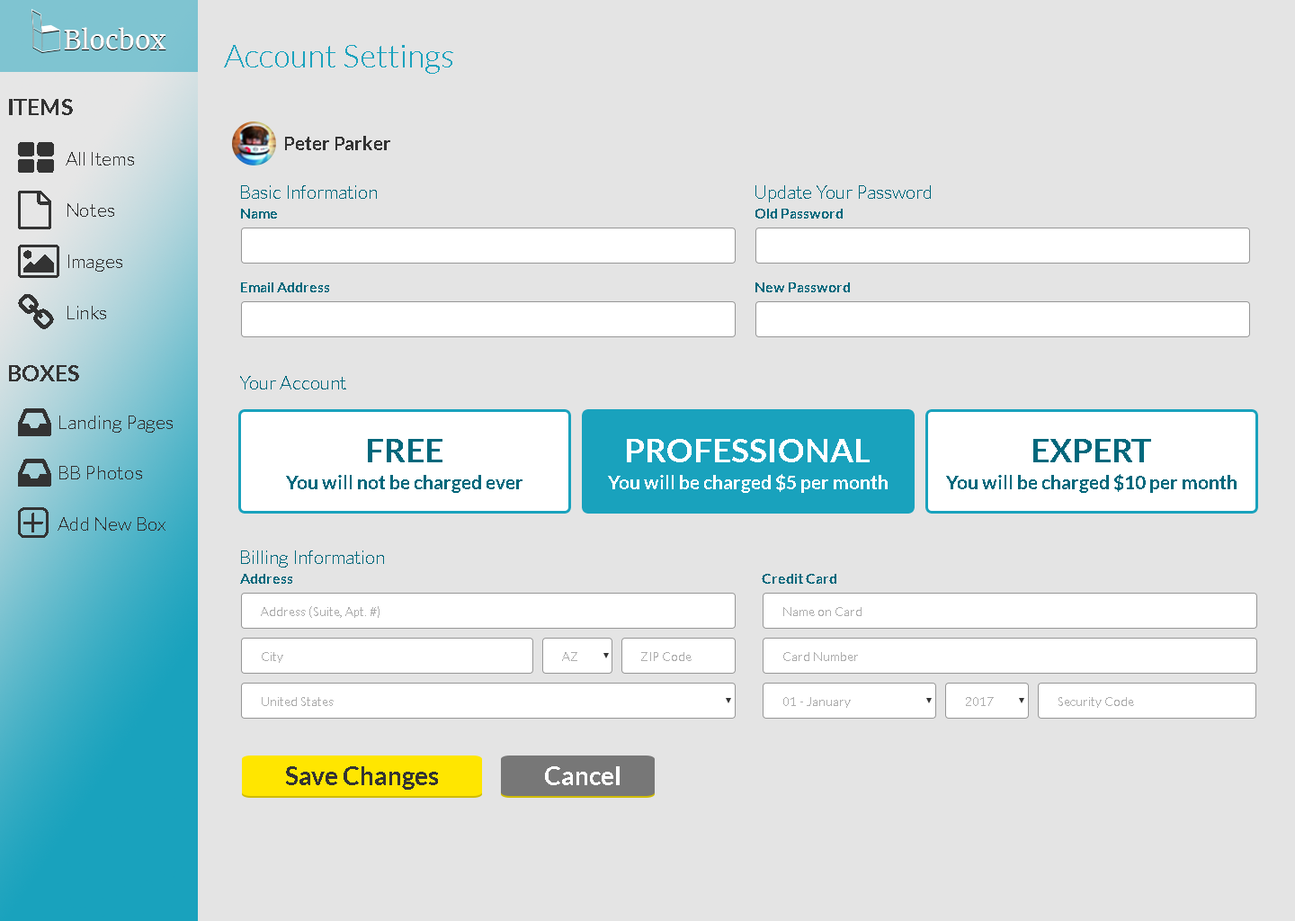
<style>
.page{position:relative;width:1295px;height:921px;background:#e4e4e4}
.page>*{position:absolute;margin:0}
.t1{font:32.4px "Lato-Light";color:#19a2bd}
.t2{font:22.4px "Lato-Bold";color:#333333;text-transform:uppercase}
.t3{font:18.9px "Lato-Bold";color:#333333}
.t4{font:19.2px/51.2px "Lato-Light";color:#333333}
.t5{font:18.9px "Lato-Light";color:#00687c}
.t6{font:14.4px "Lato-Bold";color:#00687c}
.t7{font:33.6px "Lato-Bold";color:#00687c}
.t8{font:33.6px "Lato-Bold";color:#ffffff}
.t9{font:19.2px "Lato-Bold";color:#ffffff}
.t10{font:19.2px "Lato-Bold";color:#00687c}
.t11{font:12.6px "Lato-Light";color:#adadad}
.t12{font:25.6px "Lato-Bold";color:#333333}
.t13{font:25.6px "Lato-Bold";color:#ffffff}
</style>
<div class="page">
<p class="t1" style="left:224px;top:45px;width:229px;height:29px">Account Settings</p>
<p class="t2" style="left:9px;top:99px;width:64px;height:16px">Items</p>
<p class="t3" style="left:285px;top:136px;width:105px;height:14px">Peter Parker</p>
<p class="t4" style="left:66px;top:152px;width:68px;height:167px;text-align:justify">All Items<br>Notes<br>Images<br>Links</p>
<p class="t5" style="left:241px;top:185px;width:136px;height:14px">Basic Information</p>
<p class="t5" style="left:755px;top:185px;width:176px;height:17px">Update Your Password</p>
<p class="t6" style="left:241px;top:209px;width:36px;height:10px">Name</p>
<p class="t6" style="left:755px;top:209px;width:88px;height:10px">Old Password</p>
<p class="t6" style="left:241px;top:282px;width:88px;height:10px">Email Address</p>
<p class="t6" style="left:755px;top:282px;width:95px;height:10px">New Password</p>
<p class="t2" style="left:9px;top:365px;width:70px;height:16px">Boxes</p>
<p class="t5" style="left:240px;top:376px;width:106px;height:13px">Your Account</p>
<p class="t4" style="left:58px;top:415px;width:115px;height:116px;text-align:justify">Landing Pages<br>BB Photos<br>Add New Box</p>
<p class="t7" style="left:368px;top:439px;width:74px;height:23px">FREE</p>
<p class="t8" style="left:627px;top:439px;width:243px;height:23px">PROFESSIONAL</p>
<p class="t7" style="left:1033px;top:439px;width:118px;height:23px">EXPERT</p>
<p class="t9" style="left:608px;top:474px;width:280px;height:19px">You will be charged $5 per month</p>
<p class="t10" style="left:946px;top:474px;width:290px;height:19px">You will be charged $10 per month</p>
<p class="t10" style="left:286px;top:475px;width:236px;height:18px">You will not be charged ever</p>
<p class="t5" style="left:241px;top:550px;width:143px;height:17px">Billing Information</p>
<p class="t6" style="left:240px;top:574px;width:52px;height:10px">Address</p>
<p class="t6" style="left:762px;top:574px;width:74px;height:10px">Credit Card</p>
<p class="t11" style="left:261px;top:606px;width:118px;height:12px">Address (Suite, Apt. #)</p>
<p class="t11" style="left:783px;top:607px;width:78px;height:9px">Name on Card</p>
<p class="t11" style="left:262px;top:652px;width:21px;height:11px">City</p>
<p class="t11" style="left:562px;top:652px;width:15px;height:9px">AZ</p>
<p class="t11" style="left:641px;top:652px;width:51px;height:9px">ZIP Code</p>
<p class="t11" style="left:783px;top:652px;width:75px;height:9px">Card Number</p>
<p class="t11" style="left:262px;top:697px;width:72px;height:9px">United States</p>
<p class="t11" style="left:783px;top:697px;width:68px;height:11px">01 - Januarytt</p>
<p class="t11" style="left:966px;top:697px;width:28px;height:9px">2017</p>
<p class="t11" style="left:1058px;top:697px;width:76px;height:11px">Security Code</p>
<p class="t12" style="left:286px;top:766px;width:152px;height:24px">Save Changes</p>
<p class="t13" style="left:545px;top:766px;width:75px;height:19px">Cancel</p>
</div>
